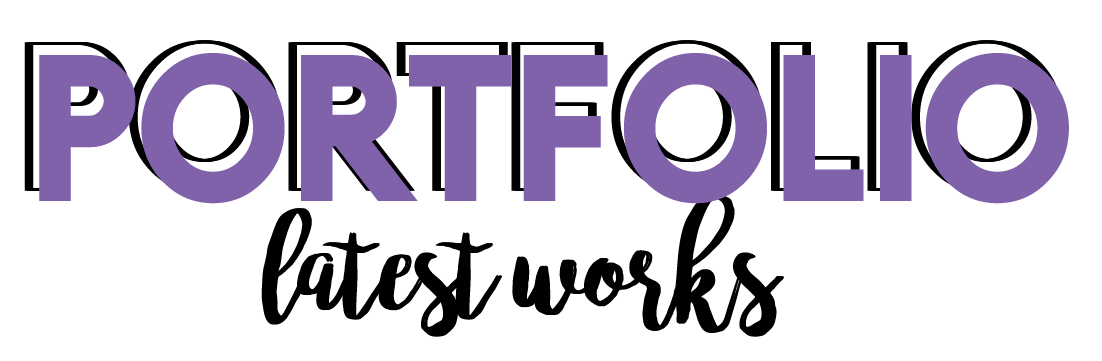
<style>
.page{position:relative;width:1102px;height:361px;background:#ffffff}
.page>*{position:absolute;margin:0}
.t1{font:208.3px "Tokyo-Outline"}
.t2{font:208.3px "Tokyo-Regular";color:#7f62aa}
.t3{font:125px "bromello";color:#000000}
</style>
<div class="page">
<p class="t1" style="left:24px;top:40px;width:1033px;height:153px">portfolio</p>
<p class="t1" style="left:26px;top:40px;width:1033px;height:153px">portfolio</p>
<p class="t1" style="left:28px;top:40px;width:1033px;height:153px">portfolio</p>
<p class="t1" style="left:28px;top:40px;width:1033px;height:153px">portfolio</p>
<p class="t1" style="left:30px;top:40px;width:1033px;height:153px">portfolio</p>
<p class="t2" style="left:39px;top:53px;width:1030px;height:151px">PORTFOLIO</p>
<p class="t3" style="left:261px;top:193px;width:520px;height:144px">latest works</p>
<p class="t3" style="left:264px;top:193px;width:520px;height:144px">latest works</p>
</div>
